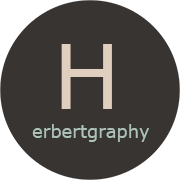
<style>
.page{position:relative;width:180px;height:180px;background:#383432}
.page>*{position:absolute;margin:0}
.t1{font:90px "Verdana";color:#e0cebf}
.t2{font:18px "Verdana";color:#acc2b9}
</style>
<div class="page">
<p class="t1" style="left:61px;top:44px;width:51px;height:65px">H</p>
<p class="t2" style="left:32px;top:124px;width:117px;height:18px">erbertgraphy</p>
</div>
